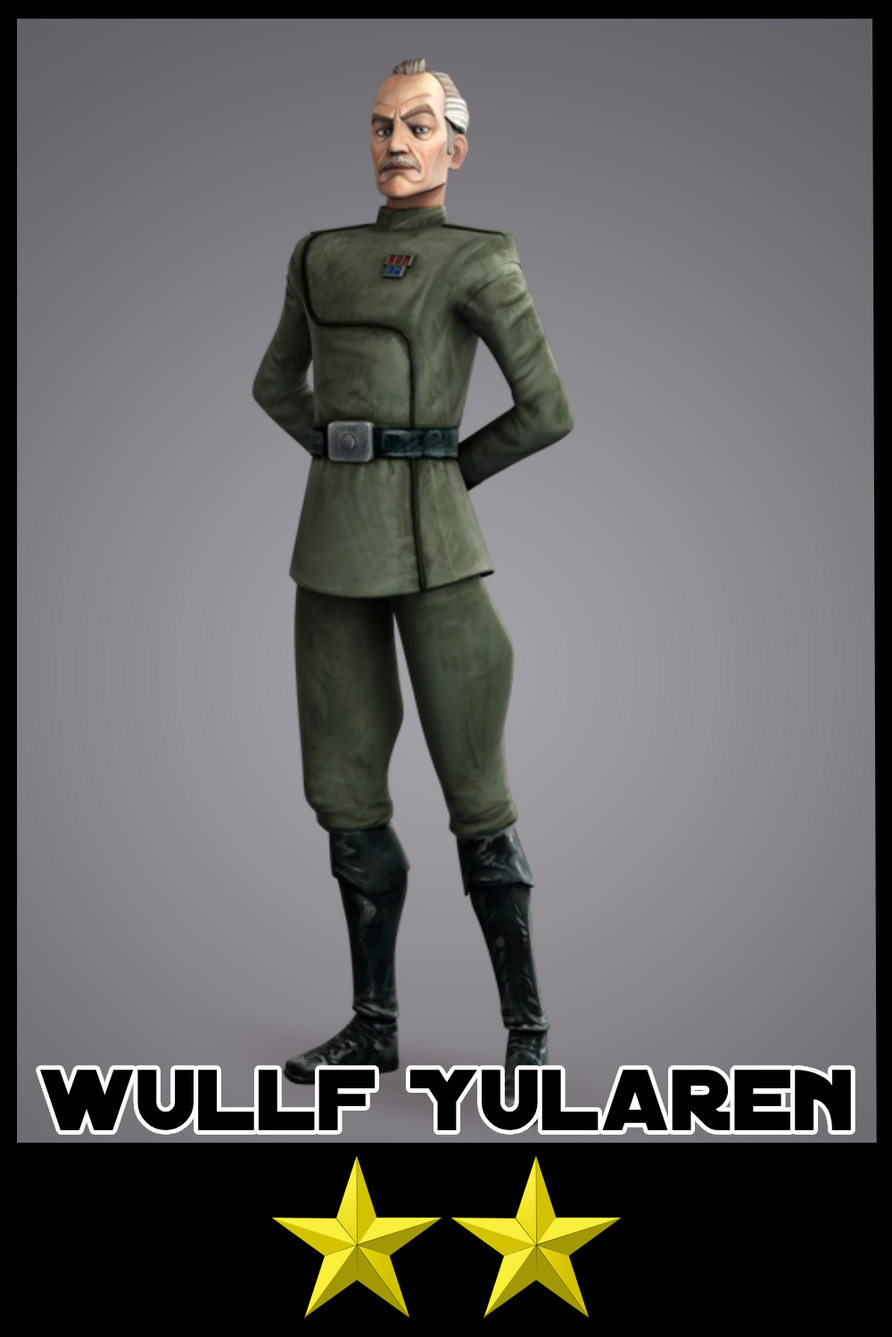
<style>
.page{position:relative;width:892px;height:1337px}
.page>*{position:absolute;margin:0}
.t1{font:92.9px "DistantGalaxy";color:#000000}
</style>
<div class="page">
<p class="t1" style="left:40px;top:1070px;width:811px;height:61px">wullf Yularen</p>
</div>
